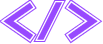
<style>
.page{position:relative;width:103px;height:44px;background:#ffffff}
.page>*{position:absolute;margin:0}
.t1{font:72px "Varsity-Regular";color:#9849ff}
.t2{font:60px "Varsity-Regular";color:#9849ff}
</style>
<div class="page">
<p class="t1" style="left:0px;top:0px;width:37px;height:44px">&lt;</p>
<p class="t2" style="left:33px;top:0px;width:33px;height:42px">/</p>
<p class="t1" style="left:64px;top:0px;width:39px;height:44px">&gt;</p>
</div>
